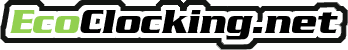
<style>
.page{position:relative;width:348px;height:50px;background:#ffffff}
.page>*{position:absolute;margin:0}
.t1{font:36px "Serpentine-Bold-Bold";color:#000000;font-style:italic}
.t2{font:36px "Serpentine-Bold-Bold";color:#92d050;font-style:italic}
</style>
<div class="page">
<p class="t1" style="left:10px;top:10px;width:328px;height:30px"><span class="t2">Eco</span>Clocking.net</p>
</div>
